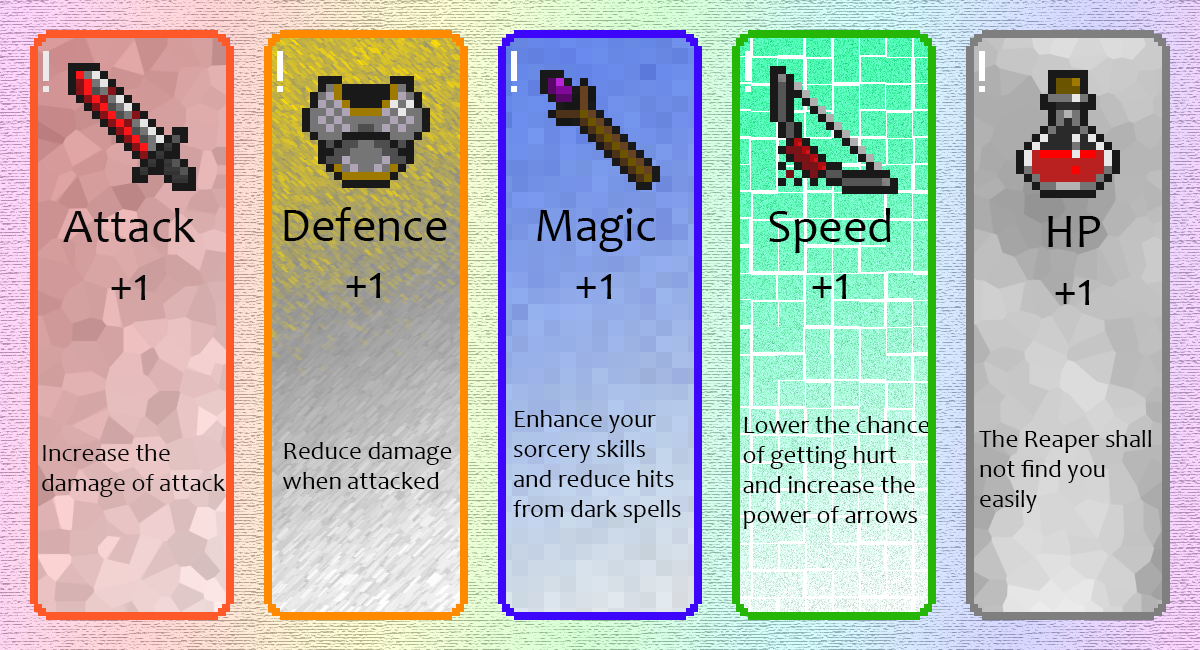
<style>
.page{position:relative;width:1200px;height:650px}
.page>*{position:absolute;margin:0}
.t1{font:48px "Candara";color:#090909}
.t2{font:48px "Candara";color:#000000}
.t3{font:25px "Candara";color:#000000}
.t4{font:25px "Candara";color:#090909}
</style>
<div class="page">
<p class="t1" style="left:63px;top:208px;width:133px;height:92px;text-align:center">Attack<br>+1</p>
<p class="t2" style="left:284px;top:207px;width:163px;height:91px;text-align:center">Defence<br>+1</p>
<p class="t2" style="left:537px;top:208px;width:119px;height:91px;text-align:center">Magic<br>+1</p>
<p class="t2" style="left:769px;top:208px;width:122px;height:91px;text-align:center">Speed<br>+1</p>
<p class="t2" style="left:1048px;top:216px;width:52px;height:89px;text-align:center">HP<br>+1</p>
<p class="t3" style="left:513px;top:410px;width:168px;height:113px">Enhance your<br>sorcery skills<br>and reduce hits<br>from dark spells</p>
<p class="t3" style="left:743px;top:416px;width:187px;height:113px">Lower the chance<br>of getting hurt<br>and increase the<br>power of arrows</p>
<p class="t3" style="left:979px;top:430px;width:172px;height:83px">The Reaper shall<br>not find you<br>easily</p>
<p class="t4" style="left:42px;top:444px;width:183px;height:53px">Increase the<br>damage of attack</p>
<p class="t3" style="left:283px;top:442px;width:169px;height:47px">Reduce damage<br>when attacked</p>
</div>
